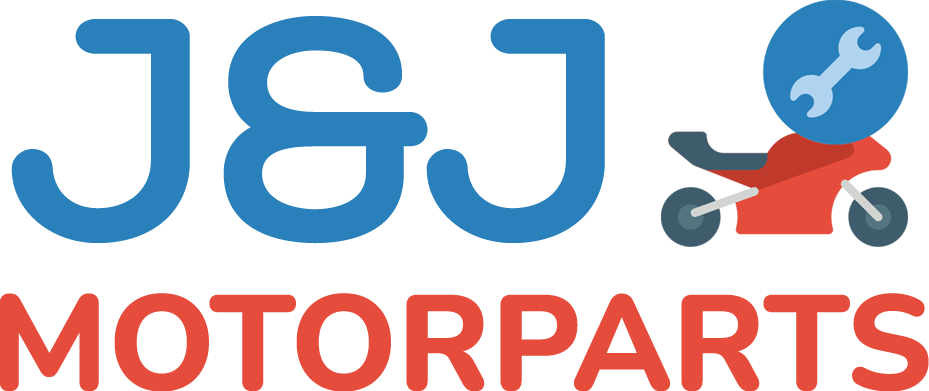
<style>
.page{position:relative;width:929px;height:391px;background:#ffffff}
.page>*{position:absolute;margin:0}
.t1{font:347px "Hero-Bold";color:#2980ba}
.t2{font:135px "Nunito-ExtraBold";color:#e64c3c}
</style>
<div class="page">
<p class="t1" style="left:11px;top:16px;width:594px;height:228px">J&amp;J</p>
<p class="t2" style="left:0px;top:293px;width:929px;height:98px">MOTORPARTS</p>
</div>
